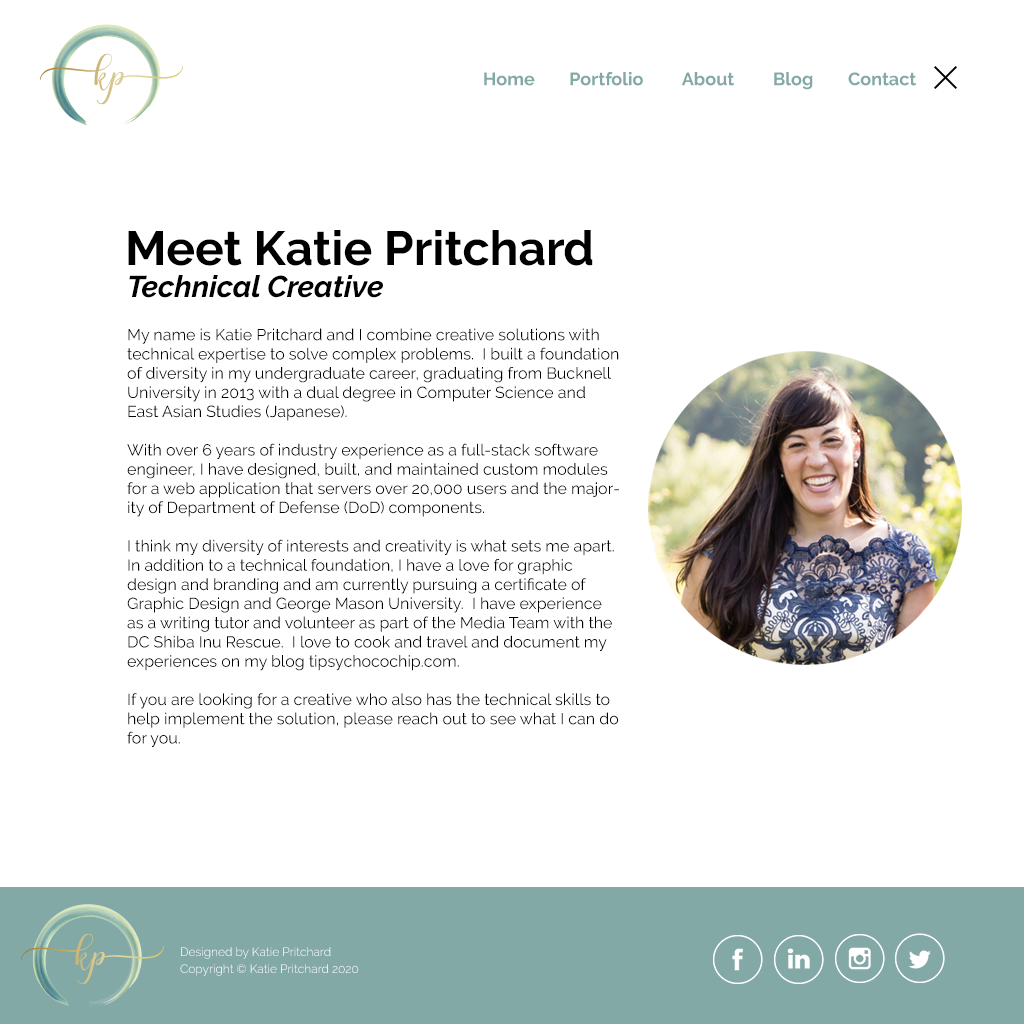
<style>
.page{position:relative;width:1024px;height:1024px;background:#ffffff}
.page>*{position:absolute;margin:0}
.t1{font:18px "Raleway-Bold";color:#83a9a7}
.t2{font:48px "Raleway-Bold";color:#000000}
.t3{font:30px "Raleway-BoldItalic";color:#000000}
.t4{font:16px "Raleway-Regular";color:#000000}
.t5{font:12px "Raleway-Light";color:#ffffff}
</style>
<div class="page">
<p class="t1" style="left:484px;top:72px;width:432px;height:18px">Home        Portfolio         About         Blog        Contact</p>
<p class="t2" style="left:128px;top:230px;width:465px;height:36px">Meet Katie Pritchard</p>
<p class="t3" style="left:129px;top:275px;width:254px;height:23px">Technical Creative</p>
<p class="t4" style="left:127px;top:328px;width:492px;height:419px">My name is Katie Pritchard and I combine creative solutions with technical expertise to solve complex problems.  I built a foundation of diversity in my undergraduate career, graduating from Bucknell University in 2013 with a dual degree in Computer Science and East Asian Studies (Japanese).  <br><br>With over 6 years of industry experience as a full-stack software engineer, I have designed, built, and maintained custom modules for a web application that servers over 20,000 users and the majority of Department of Defense (DoD) components.<br><br>I think my diversity of interests and creativity is what sets me apart.  In addition to a technical foundation, I have a love for graphic design and branding and am currently pursuing a certificate of Graphic Design and George Mason University.  I have experience as a writing tutor and volunteer as part of the Media Team with the DC Shiba Inu Rescue.  I love to cook and travel and document my experiences on my blog tipsychocochip.com.  <br><br>If you are looking for a creative who also has the technical skills to help implement the solution, please reach out to see what I can do for you.</p>
<p class="t5" style="left:181px;top:947px;width:150px;height:12px">Designed by Katie Pritchard</p>
<p class="t5" style="left:180px;top:964px;width:179px;height:12px">Copyright © Katie Pritchard 2020</p>
</div>
